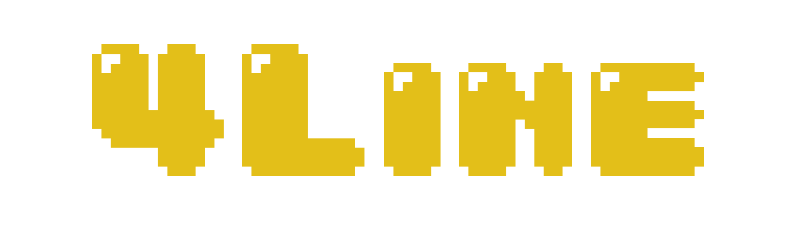
<style>
.page{position:relative;width:800px;height:250px;background:#ffffff}
.page>*{position:absolute;margin:0}
.t1{font:160px "04b30";color:#e4c019}
</style>
<div class="page">
<p class="t1" style="left:92px;top:44px;width:612px;height:132px">4Line</p>
</div>
